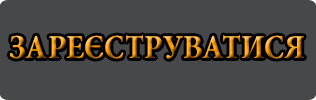
<style>
.page{position:relative;width:316px;height:100px;background:#47484a}
.page>*{position:absolute;margin:0}
.t1{font:34px "MinionPro-BoldCn"}
</style>
<div class="page">
<p class="t1" style="left:10px;top:35px;width:294px;height:24px">ЗАРЕЄСТРУВАТИСЯ</p>
</div>
